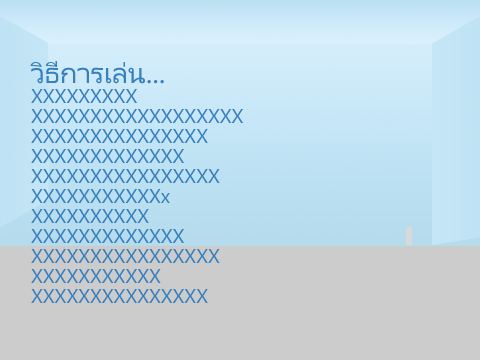
<style>
.page{position:relative;width:480px;height:360px;background:#cccccc}
.page>*{position:absolute;margin:0}
.t1{font:20px/20px "Leelawadee";color:#377fbd}
.t2{font:30px/20px "Leelawadee";color:#377fbd}
</style>
<div class="page">
<p class="t1" style="left:30px;top:61px;width:213px;height:242px"><span class="t2">วิธีการเล่น...<br></span>XXXXXXXXX<br>XXXXXXXXXXXXXXXXXX<br>XXXXXXXXXXXXXXX<br>XXXXXXXXXXXXX<br>XXXXXXXXXXXXXXXX<br>XXXXXXXXXXXx<br>XXXXXXXXXX<br>XXXXXXXXXXXXX<br>XXXXXXXXXXXXXXXX<br>XXXXXXXXXXX<br>XXXXXXXXXXXXXXX</p>
</div>
